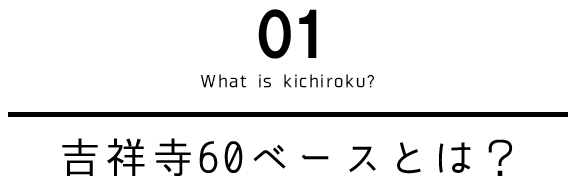
<style>
.page{position:relative;width:576px;height:187px;background:#ffffff}
.page>*{position:absolute;margin:0}
.t1{font:60px "HGPSoeiKakugothicUB";letter-spacing:-0.05em;color:#000000}
.t2{font:16px "04KanjyukuGothic";letter-spacing:0.1em;color:#000000}
.t3{font:42px "komorebi-gothic";letter-spacing:0.1em;color:#000000}
</style>
<div class="page">
<p class="t1" style="left:258px;top:9px;width:59px;height:50px">01</p>
<p class="t2" style="left:200px;top:74px;width:175px;height:14px">What is kichiroku?</p>
<p class="t3" style="left:62px;top:138px;width:451px;height:38px">吉祥寺60ベースとは？</p>
</div>
